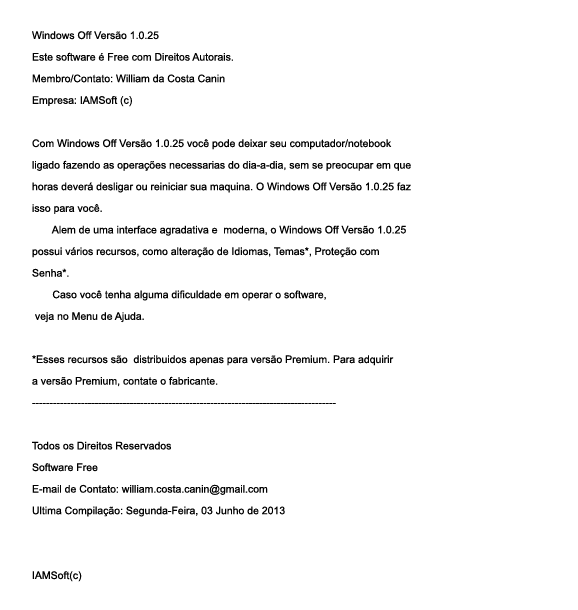
<style>
.page{position:relative;width:578px;height:610px;background:#ffffff}
.page>*{position:absolute;margin:0}
.t1{font:18px "ArialMT";color:#000000}
</style>
<div class="page">
<p class="t1" style="left:32px;top:31px;width:379px;height:551px">Windows Off Versão 1.0.25<br>Este software é Free com Direitos Autorais.<br>Membro/Contato: William da Costa Canin<br>Empresa: IAMSoft (c)<br><br>Com Windows Off Versão 1.0.25 você pode deixar seu computador/notebook <br>ligado fazendo as operações necessarias do dia-a-dia, sem se preocupar em que<br>horas deverá desligar ou reiniciar sua maquina. O Windows Off Versão 1.0.25 faz<br>isso para você.<br>       Alem de uma interface agradativa e  moderna, o Windows Off Versão 1.0.25 <br>possui vários recursos, como alteração de Idiomas, Temas*, Proteção com <br>Senha*.<br>       Caso você tenha alguma dificuldade em operar o software,<br> veja no Menu de Ajuda.<br><br>*Esses recursos são  distribuidos apenas para versão Premium. Para adquirir<br>a versão Premium, contate o fabricante.<br>---------------------------------------------------------------------------------------<br><br>Todos os Direitos Reservados<br>Software Free<br>E-mail de Contato: william.costa.canin@gmail.com<br>Ultima Compilação: Segunda-Feira, 03 Junho de 2013<br><br><br>IAMSoft(c)</p>
</div>
